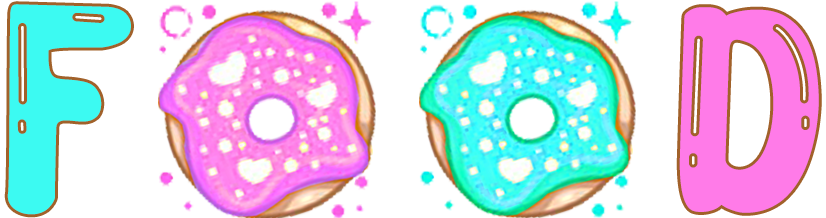
<style>
.page{position:relative;width:826px;height:218px;background:#ffffff}
.page>*{position:absolute;margin:0}
.t1{font:265px "ChocoBubble-BallonStyle";color:#3cfaf2}
.t2{font:265px "ChocoBubble-BallonStyle";color:#ff7be8}
</style>
<div class="page">
<p class="t1" style="left:7px;top:4px;width:124px;height:211px">F</p>
<p class="t2" style="left:679px;top:7px;width:140px;height:206px">D</p>
</div>
